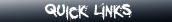
<style>
.page{position:relative;width:172px;height:22px}
.page>*{position:absolute;margin:0}
.t1{font:25px "YouMurdererBB";color:#ffffff}
</style>
<div class="page">
<p class="t1" style="left:44px;top:3px;width:88px;height:18px">Quick Links</p>
</div>
